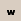
<style>
.page{position:relative;width:21px;height:21px;background:#d9cdc1}
.page>*{position:absolute;margin:0}
.t1{font:9px "Tahoma-Bold";color:#000000}
</style>
<div class="page">
<p class="t1" style="left:7px;top:10px;width:8px;height:5px">w</p>
</div>
